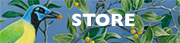
<style>
.page{position:relative;width:180px;height:43px}
.page>*{position:absolute;margin:0}
.t1{font:18.1px "GillSans-Bold";color:#ffffff}
</style>
<div class="page">
<p class="t1" style="left:72px;top:13px;width:63px;height:13px">STORE</p>
</div>
